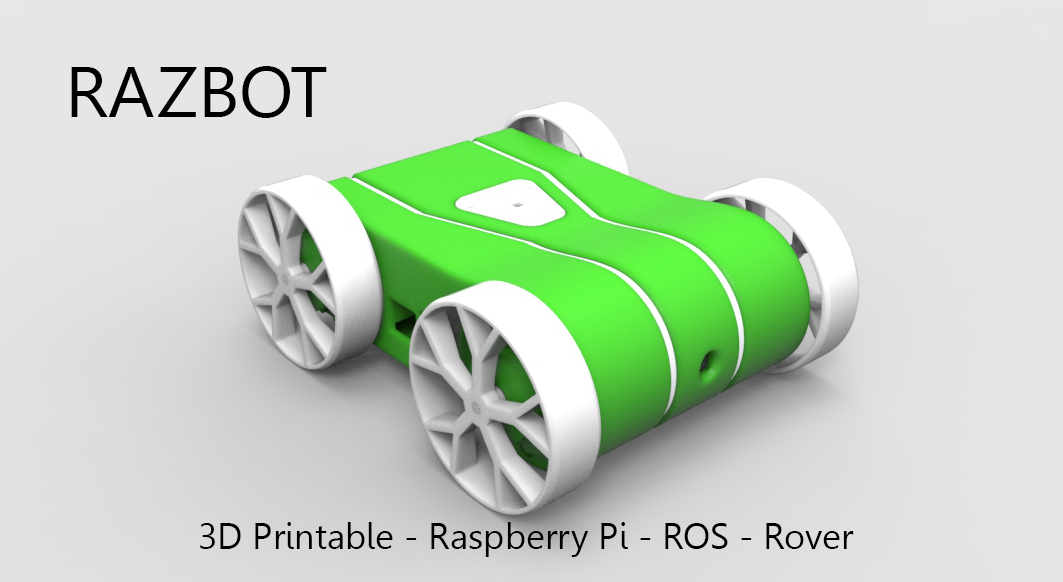
<style>
.page{position:relative;width:1063px;height:582px}
.page>*{position:absolute;margin:0}
.t1{font:72px "Leelawadee";color:#000000}
.t2{font:36px "Leelawadee";color:#000000}
</style>
<div class="page">
<p class="t1" style="left:71px;top:66px;width:256px;height:52px">RAZBOT</p>
<p class="t2" style="left:200px;top:522px;width:654px;height:35px">3D Printable - Raspberry Pi - ROS - Rover</p>
</div>
